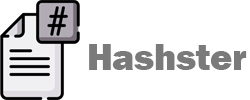
<style>
.page{position:relative;width:250px;height:100px;background:#ffffff}
.page>*{position:absolute;margin:0}
.t1{font:37.5px "FranklinGothic-Heavy";color:#7a7a7a}
</style>
<div class="page">
<p class="t1" style="left:89px;top:44px;width:158px;height:26px">Hashster</p>
</div>
